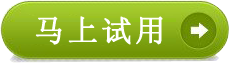
<style>
.page{position:relative;width:229px;height:63px}
.page>*{position:absolute;margin:0}
.t1{font:30px "SimSun";letter-spacing:0.1em;color:#ffffff;font-weight:bold}
</style>
<div class="page">
<p class="t1" style="left:35px;top:16px;width:128px;height:29px">马上试用</p>
</div>
